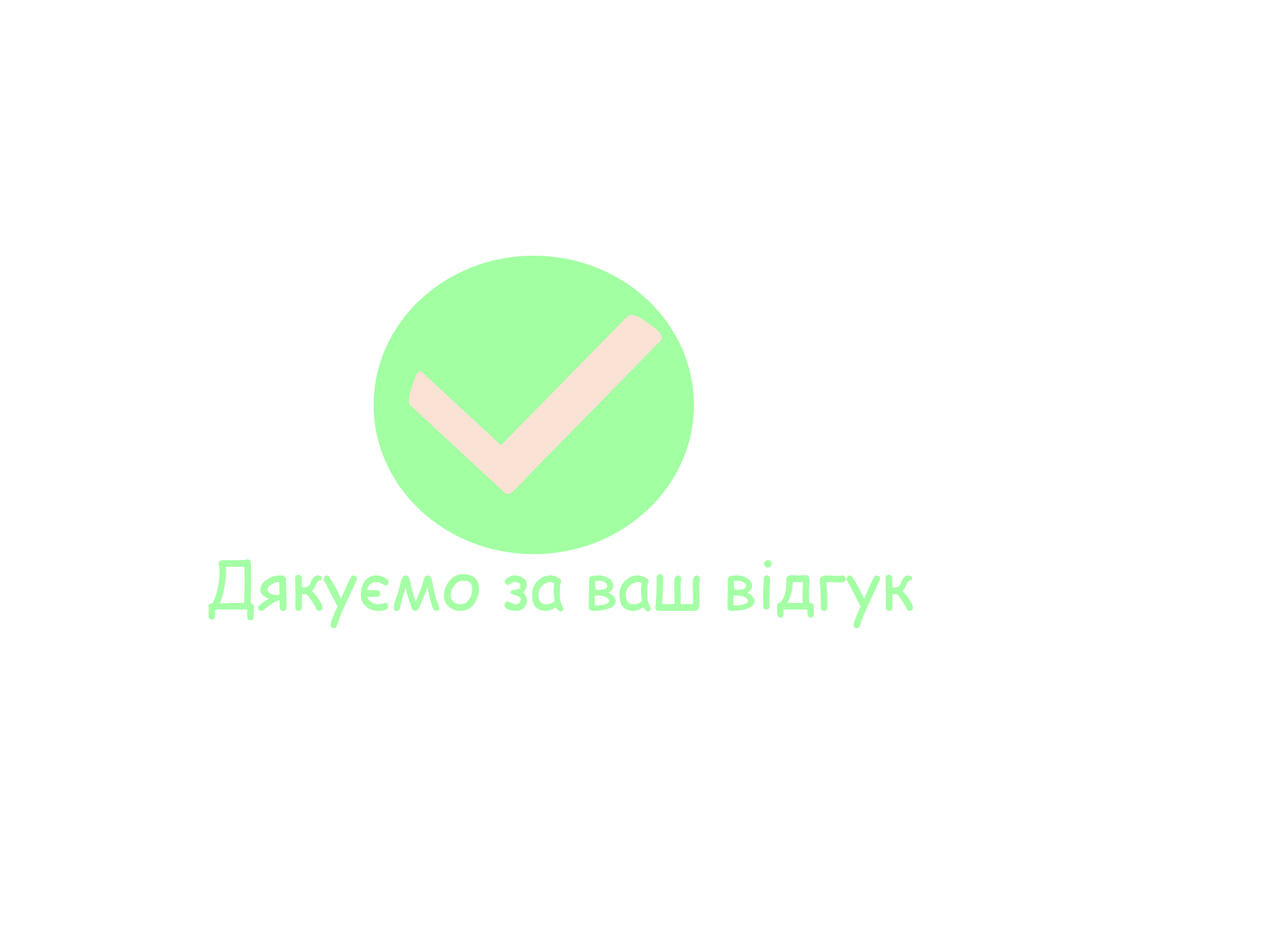
<style>
.page{position:relative;width:1261px;height:946px;background:#ffffff}
.page>*{position:absolute;margin:0}
.t1{font:66.7px "ComicSansMS";color:#a5ffa5}
</style>
<div class="page">
<p class="t1" style="left:208px;top:559px;width:705px;height:69px">Дякуємо за ваш відгук</p>
</div>
